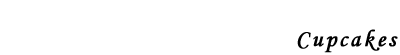
<style>
.page{position:relative;width:400px;height:55px;background:#ffffff}
.page>*{position:absolute;margin:0}
.t1{font:24px "MonotypeCorsiva";letter-spacing:0.1em;color:#000000;font-weight:bold}
</style>
<div class="page">
<p class="t1" style="left:297px;top:29px;width:101px;height:24px">Cupcakes</p>
</div>
